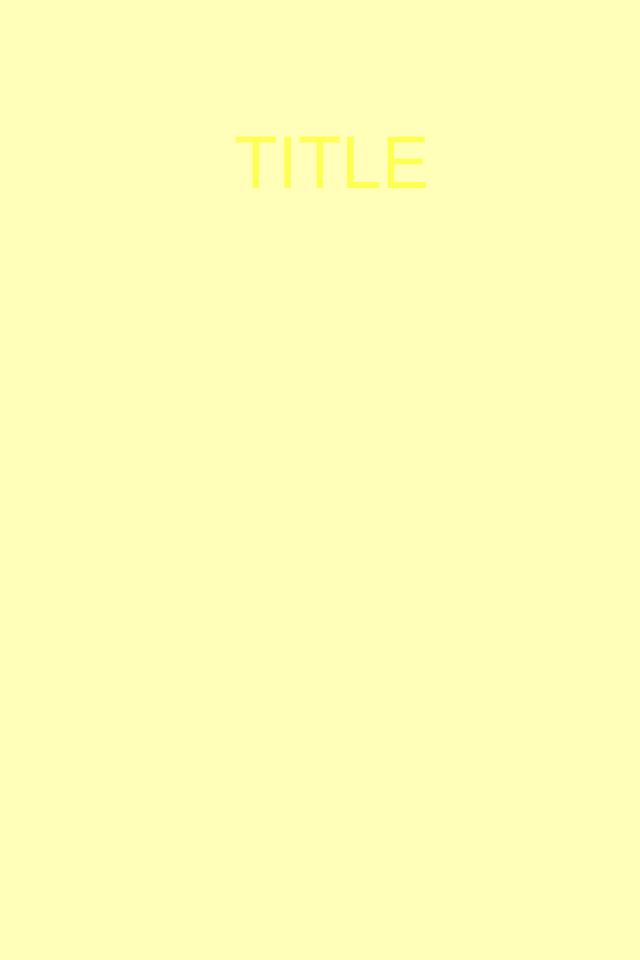
<style>
.page{position:relative;width:640px;height:960px;background:#ffffba}
.page>*{position:absolute;margin:0}
.t1{font:72px "ArialMT";color:#fdff53}
</style>
<div class="page">
<p class="t1" style="left:235px;top:136px;width:191px;height:52px">TITLE</p>
</div>
